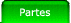
<style>
.page{position:relative;width:71px;height:23px}
.page>*{position:absolute;margin:0}
.t1{font:10px "Verdana";color:#ffffff}
</style>
<div class="page">
<p class="t1" style="left:20px;top:8px;width:31px;height:9px">Partes</p>
</div>
